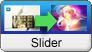
<style>
.page{position:relative;width:92px;height:52px}
.page>*{position:absolute;margin:0}
.t1{font:12px "ArialMT";color:#000000}
</style>
<div class="page">
<p class="t1" style="left:31px;top:38px;width:31px;height:10px">Slider</p>
</div>
